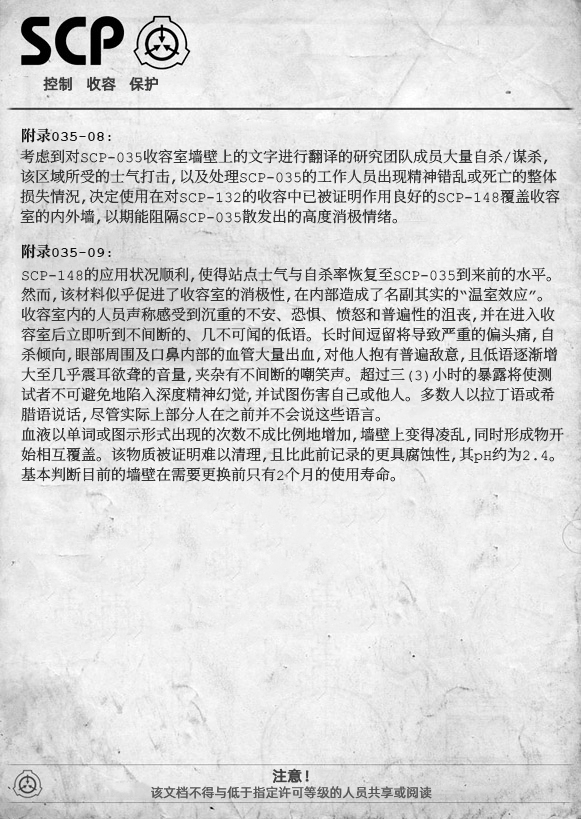
<style>
.page{position:relative;width:581px;height:819px}
.page>*{position:absolute;margin:0}
.t1{font:15px "AlibabaPuHuiTiR";color:#3d3d3d;font-weight:bold}
.t2{font:15px "CourierNewPS-BoldMT";color:#121212}
.t3{font:15px "ContainmentBreach-Bold";color:#121212}
.t4{font:15px/20px "ContainmentBreach-Regular";color:#353535}
.t5{font:15px "AlibabaPuHuiTiR";color:#414141;font-weight:bold}
.t6{font:13px "AlibabaPuHuiTiR";color:#575757}
</style>
<div class="page">
<p class="t1" style="left:43px;top:76px;width:115px;height:15px">控制   收容   保护</p>
<p class="t2" style="left:22px;top:128px;width:89px;height:15px"><span class="t3">附录</span>035-08:</p>
<p class="t4" style="left:20px;top:149px;width:540px;height:76px">考虑到对SCP-035收容室墙壁上的文字进行翻译的研究团队成员大量自杀/谋杀，<br>该区域所受的士气打击，以及处理SCP-035的工作人员出现精神错乱或死亡的整体<br>损失情況，决定使用在对SCP-132的收容中已被证明作用良好的SCP-148覆盖收容<br>室的内外墙，以期能阻隔SCP-035散发出的高度消极情绪。</p>
<p class="t2" style="left:22px;top:244px;width:89px;height:15px"><span class="t3">附录</span>035-09:</p>
<p class="t4" style="left:21px;top:267px;width:543px;height:215px">SCP-148的应用状况顺利，使得站点士气与自杀率恢复至SCP-035到来前的水平。<br>然而，该材料似乎促进了收容室的消极性，在内部造成了名副其实的“温室效应”。<br>收容室内的人员声称感受到沉重的不安、恐惧、愤怒和普遍性的沮丧，并在进入收<br>容室后立即听到不间断的、几不可闻的低语。长时间逗留将导致严重的偏头痛，自<br>杀倾向，眼部周围及口鼻内部的血管大量出血，对他人抱有普遍敌意，且低语逐渐增<br>大至几乎震耳欲聋的音量，夹杂有不间断的嘲笑声。超过三（3）小时的暴露将使测<br>试者不可避免地陷入深度精神幻觉，并试图伤害自己或他人。多数人以拉丁语或希<br>腊语说话，尽管实际上部分人在之前并不会说这些语言。<br>血液以单词或图示形式出现的次数不成比例地增加，墙壁上变得凌乱，同时形成物开<br>始相互覆盖。该物质被证明难以清理，且比此前记录的更具腐蚀性，其pH约为2.4。<br>基本判断目前的墙壁在需要更换前只有2个月的使用寿命。</p>
<p class="t5" style="left:272px;top:768px;width:37px;height:15px">注意！</p>
<p class="t6" style="left:151px;top:786px;width:281px;height:13px">该文档不得与低于指定许可等级的人员共享或阅读</p>
</div>
